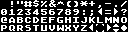
<style>
.page{position:relative;width:128px;height:32px;background:#000000}
.page>*{position:absolute;margin:0}
.t1{font:8px "AtariClassicChunky";color:#ffffff}
</style>
<div class="page">
<p class="t1" style="left:11px;top:0px;width:116px;height:8px">! #$%&amp;^()*+,-./</p>
<p class="t1" style="left:1px;top:17px;width:126px;height:6px">@ABCDEFGHIJKLMNO</p>
<p class="t1" style="left:1px;top:8px;width:126px;height:8px">0123456789:;&lt;=&gt;?</p>
<p class="t1" style="left:1px;top:25px;width:127px;height:6px">PQRSTUVWXYZ[\]^_</p>
</div>
